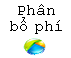
<style>
.page{position:relative;width:71px;height:58px;background:#ffffff}
.page>*{position:absolute;margin:0}
.t1{font:12px/16px "CourierNewPSMT";color:#000000}
</style>
<div class="page">
<p class="t1" style="left:10px;top:4px;width:52px;height:30px;text-align:center">Phân<br>bổ phí</p>
</div>
